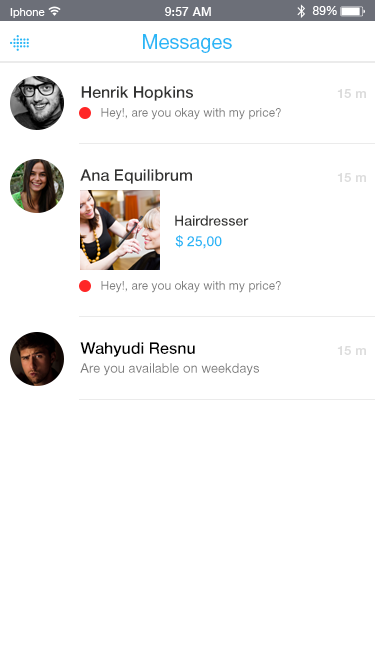
<style>
.page{position:relative;width:375px;height:667px;background:#ffffff}
.page>*{position:absolute;margin:0}
.t1{font:20px "HelveticaNeueCyr-Roman";color:#29b6f6}
.t2{font:16px "HelveticaNeueCyr-Medium";color:#343433}
.t3{font:13px "HelveticaNeueCyr-Medium";color:#dbdbdb}
.t4{font:12px "HelveticaNeueCyr-Roman";color:#7d7d7d}
.t5{font:13px "HelveticaNeueCyr-Medium";color:#dddddd}
.t6{font:14px "HelveticaNeueCyr-Medium";color:#343433}
.t7{font:14px "HelveticaNeueCyr-Medium";color:#29b6f6}
.t8{font:16px "HelveticaNeueCyr-Medium";color:#000000}
.t9{font:13px "HelveticaNeueCyr-Roman";color:#7d7d7d}
</style>
<div class="page">
<p class="t1" style="left:143px;top:34px;width:89px;height:19px">Messages</p>
<p class="t2" style="left:81px;top:86px;width:112px;height:15px">Henrik Hopkins</p>
<p class="t3" style="left:337px;top:89px;width:29px;height:9px">15 m</p>
<p class="t4" style="left:101px;top:108px;width:180px;height:12px">Hey!, are you okay with my price?</p>
<p class="t2" style="left:80px;top:169px;width:112px;height:15px">Ana Equilibrum</p>
<p class="t5" style="left:337px;top:173px;width:29px;height:9px">15 m</p>
<p class="t6" style="left:175px;top:215px;width:74px;height:11px">Hairdresser</p>
<p class="t7" style="left:175px;top:235px;width:47px;height:14px">$ 25,00</p>
<p class="t4" style="left:101px;top:281px;width:180px;height:12px">Hey!, are you okay with my price?</p>
<p class="t8" style="left:80px;top:342px;width:115px;height:15px">Wahyudi Resnu</p>
<p class="t5" style="left:337px;top:346px;width:29px;height:9px">15 m</p>
<p class="t9" style="left:80px;top:363px;width:179px;height:13px">Are you available on weekdays</p>
</div>
